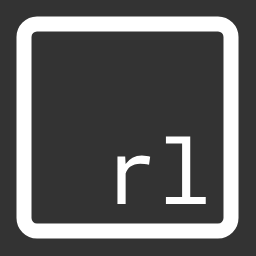
<style>
.page{position:relative;width:256px;height:256px;background:#333333}
.page>*{position:absolute;margin:0}
.t1{font:90px "RobotoMono-Regular";color:#ffffff}
</style>
<div class="page">
<p class="t1" style="left:117px;top:136px;width:89px;height:68px">rl</p>
</div>
